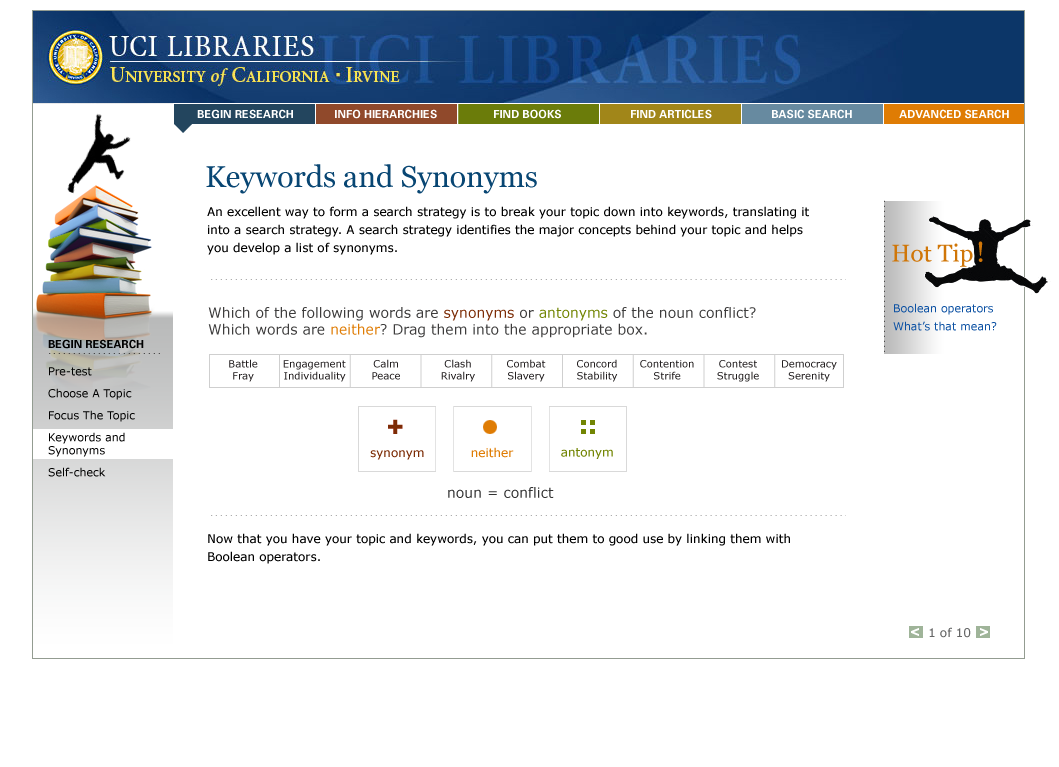
<style>
.page{position:relative;width:1059px;height:767px;background:#ffffff}
.page>*{position:absolute;margin:0}
.t1{font:30px "Georgia";color:#084673}
.t2{font:12px/18px "Verdana";color:#000000}
.t3{font:24px "Georgia";color:#d07608}
.t4{font:24px "Georgia";letter-spacing:0.075em;color:#d07608}
.t5{font:28px "Georgia";color:#d07608}
.t6{font:11px/18px "Verdana";color:#0c51a3}
.t7{font:14px "Verdana";color:#3e3d3d}
.t8{font:14px "Verdana";color:#7c2c06}
.t9{font:14px "Verdana";color:#728503}
.t10{font:14px "Verdana";color:#df7c04}
.t11{font:11px "Univers-Bold";color:#000000}
.t12{font:10px/12px "Verdana";color:#231f20}
.t13{font:11px/18px "Verdana";color:#000000}
.t14{font:11px/13px "Verdana";color:#000000}
.t15{font:12px "Verdana";color:#df7c04}
.t16{font:12px "Verdana";color:#728503}
.t17{font:12px "Verdana";color:#7c2c06}
.t18{font:14px "Verdana";color:#333333}
.t19{font:12px "Verdana";color:#656666}
</style>
<div class="page">
<p class="t1" style="left:206px;top:164px;width:331px;height:30px">Keywords and Synonyms</p>
<p class="t2" style="left:207px;top:206px;width:602px;height:49px">An excellent way to form a search strategy is to break your topic down into keywords, translating it into a search strategy. A search strategy identifies the major concepts behind your topic and helps you develop a list of synonyms.</p>
<p class="t3" style="left:892px;top:241px;width:91px;height:26px">Hot Ti<span class="t4">p</span><span class="t5">!</span></p>
<p class="t6" style="left:893px;top:303px;width:104px;height:28px">Boolean operators<br>What’s that mean?</p>
<p class="t7" style="left:208px;top:307px;width:548px;height:31px">Which of the following words are <span class="t8">synonyms </span>or <span class="t9">antonyms </span>of the noun conflict? Which words are <span class="t10">neither</span>? Drag them into the appropriate box.</p>
<p class="t11" style="left:48px;top:339px;width:96px;height:10px">BEGIN RESEARCH</p>
<p class="t12" style="left:229px;top:359px;width:608px;height:23px">Battle Engagement  Calm Clash Combat Concord Contention Contest Democracy<br> Fray  Individuality Peace Rivalry Slavery Stability Strife Struggle Serenity</p>
<p class="t13" style="left:48px;top:367px;width:87px;height:110px">Pre-test<br>Choose A Topic<br>Focus The Topic<br>Keywords and <span class="t14">Synonyms<br></span>Self-check</p>
<p class="t15" style="left:471px;top:447px;width:43px;height:11px">neither</p>
<p class="t16" style="left:561px;top:448px;width:52px;height:11px">antonym</p>
<p class="t17" style="left:370px;top:450px;width:54px;height:10px">synonym</p>
<p class="t18" style="left:448px;top:487px;width:106px;height:11px">noun = conflict</p>
<p class="t2" style="left:208px;top:533px;width:582px;height:31px">Now that you have your topic and keywords, you can put them to good use by linking them with <br>Boolean operators.</p>
<p class="t19" style="left:929px;top:627px;width:42px;height:11px">1 of 10</p>
</div>
